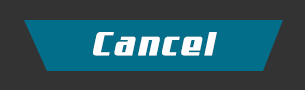
<style>
.page{position:relative;width:305px;height:90px;background:#333333}
.page>*{position:absolute;margin:0}
.t1{font:33.3px "Aero";letter-spacing:0.06em;color:#fffefe;font-weight:bold}
</style>
<div class="page">
<p class="t1" style="left:93px;top:32px;width:124px;height:24px">Cancel</p>
</div>
